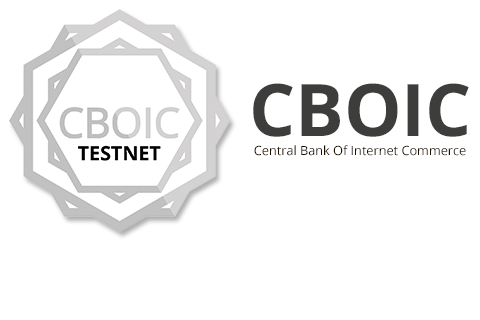
<style>
.page{position:relative;width:480px;height:320px;background:#ffffff}
.page>*{position:absolute;margin:0}
.t1{font:72.5px "OpenSans-Bold";color:#3d3e3c;text-transform:uppercase}
.t2{font:12.7px "OpenSans";color:#1d0f00}
</style>
<div class="page">
<p class="t1" style="left:253px;top:83px;width:216px;height:54px">CBOIC</p>
<p class="t2" style="left:254px;top:145px;width:212px;height:11px">Central Bank Of Internet Commerce</p>
</div>
